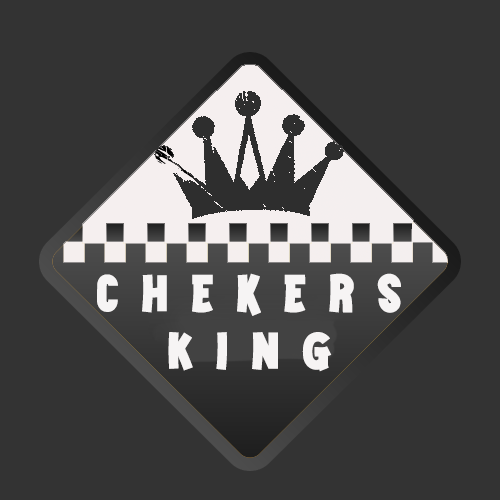
<style>
.page{position:relative;width:500px;height:500px;background:#333333}
.page>*{position:absolute;margin:0}
.t1{font:51.9px "GAMKINGPersonalUse";letter-spacing:0.45em;color:#f6f4f4}
</style>
<div class="page">
<p class="t1" style="left:97px;top:273px;width:304px;height:43px">Chekers</p>
<p class="t1" style="left:168px;top:332px;width:164px;height:40px">King</p>
</div>
